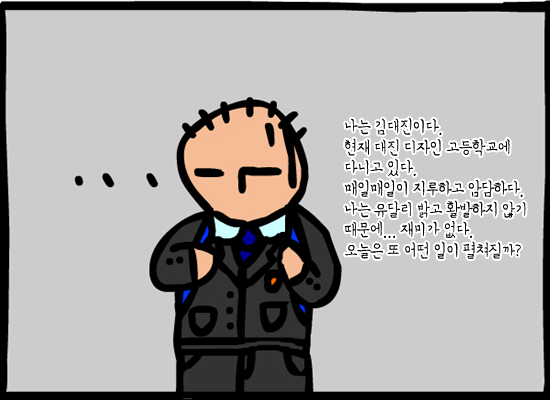
<style>
.page{position:relative;width:550px;height:400px;background:#cccccc}
.page>*{position:absolute;margin:0}
.t1{font:18px "SanGw";letter-spacing:-0.05em;color:#000000;scale:0.9 1}
.t2{font:18px/20px "SanGw";letter-spacing:-0.05em;color:#000000;scale:0.9 1}
</style>
<div class="page">
<p class="t1" style="left:345px;top:118px;width:97px;height:17px">나는 김대진이다.</p>
<p class="t2" style="left:345px;top:138px;width:165px;height:38px">현재 대진 디자인 고등학교에<br>다니고 있다.</p>
<p class="t1" style="left:344px;top:179px;width:179px;height:18px">매일매일이 지루하고 암담하다.</p>
<p class="t2" style="left:345px;top:200px;width:181px;height:38px">나는 유달리 밝고 활발하지 않기<br>때문에... 재미가 없다.</p>
<p class="t1" style="left:345px;top:241px;width:176px;height:18px">오늘은 또 어떤 일이 펼쳐질까?</p>
</div>
